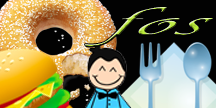
<style>
.page{position:relative;width:216px;height:108px;background:#020202}
.page>*{position:absolute;margin:0}
.t1{font:41.8px "Vivaldii";letter-spacing:0.04em;scale:2.67 1}
</style>
<div class="page">
<p class="t1" style="left:85px;top:7px;width:128px;height:40px">fos</p>
</div>
